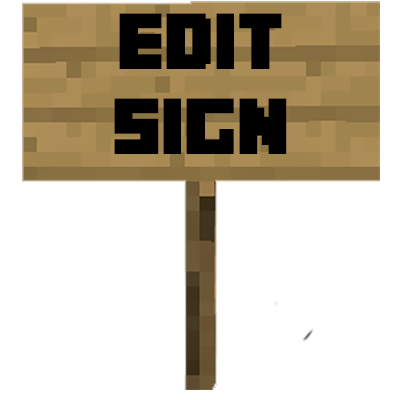
<style>
.page{position:relative;width:400px;height:400px;background:#ffffff}
.page>*{position:absolute;margin:0}
.t1{font:70.8px "Minecrafter";color:#000000}
</style>
<div class="page">
<p class="t1" style="left:114px;top:13px;width:173px;height:141px;text-align:center">Edit<br>Sign</p>
</div>
